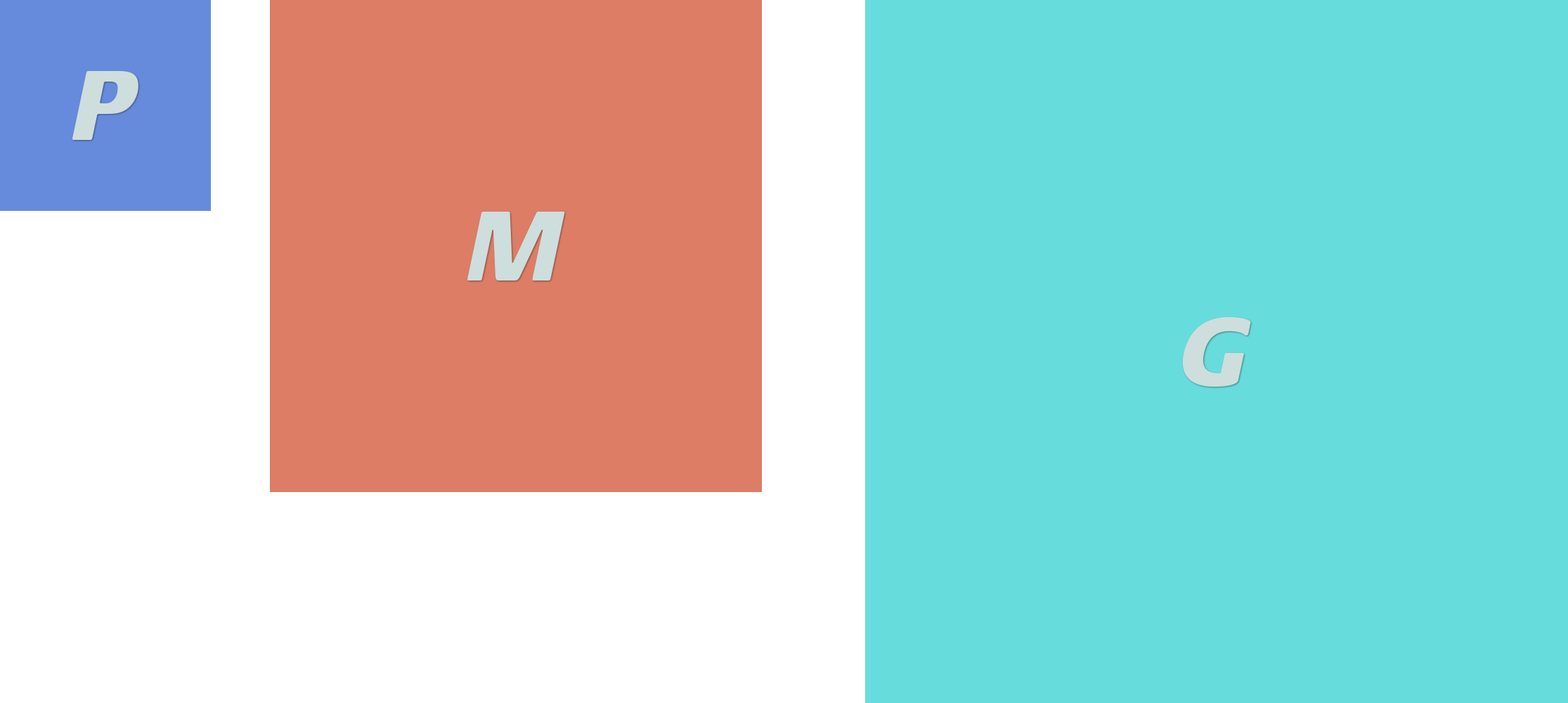
<style>
.page{position:relative;width:1568px;height:703px;background:#66dddc}
.page>*{position:absolute;margin:0}
.t1{font:101.5px "PraxisW01-HeavyOblique";color:#cededd;text-transform:uppercase}
</style>
<div class="page">
<p class="t1" style="left:72px;top:71px;width:66px;height:69px">p</p>
<p class="t1" style="left:467px;top:212px;width:98px;height:68px">m</p>
<p class="t1" style="left:1182px;top:317px;width:69px;height:70px">g</p>
</div>
